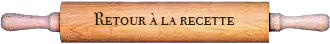
<style>
.page{position:relative;width:330px;height:44px;background:#ffffff}
.page>*{position:absolute;margin:0}
.t1{font:18px "BodoniSvtyTwoSCITCTT-Book";letter-spacing:0.005em;color:#2f1d04}
</style>
<div class="page">
<p class="t1" style="left:94px;top:12px;width:141px;height:13px">Retour à la recette</p>
</div>
